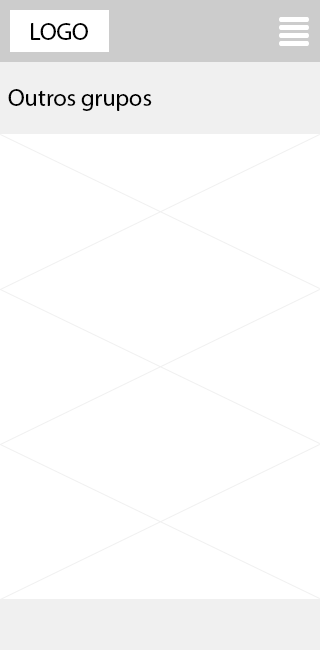
<style>
.page{position:relative;width:320px;height:650px;background:#ffffff}
.page>*{position:absolute;margin:0}
.t1{font:12px "MyriadPro-Regular";color:#000000}
.t2{font:24px "MyriadPro-Regular";color:#000000}
</style>
<div class="page">
<p class="t1" style="left:31px;top:23px;width:57px;height:17px">LOGO</p>
<p class="t2" style="left:8px;top:89px;width:144px;height:22px">Outros grupos</p>
</div>
